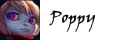
<style>
.page{position:relative;width:140px;height:40px;background:#ffffff}
.page>*{position:absolute;margin:0}
.t1{font:12px "VinerHandITC";color:#000000}
</style>
<div class="page">
<p class="t1" style="left:49px;top:10px;width:47px;height:22px">Poppy</p>
</div>
